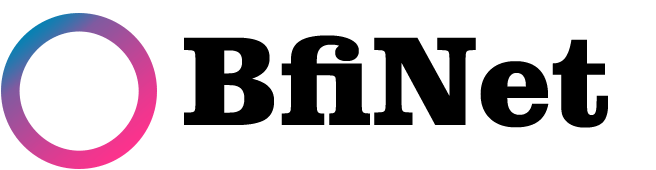
<style>
.page{position:relative;width:656px;height:170px;background:#ffffff}
.page>*{position:absolute;margin:0}
.t1{font:130px "ClarendonBT-Black";color:#000000}
</style>
<div class="page">
<p class="t1" style="left:184px;top:35px;width:424px;height:93px">BfiNet</p>
</div>
